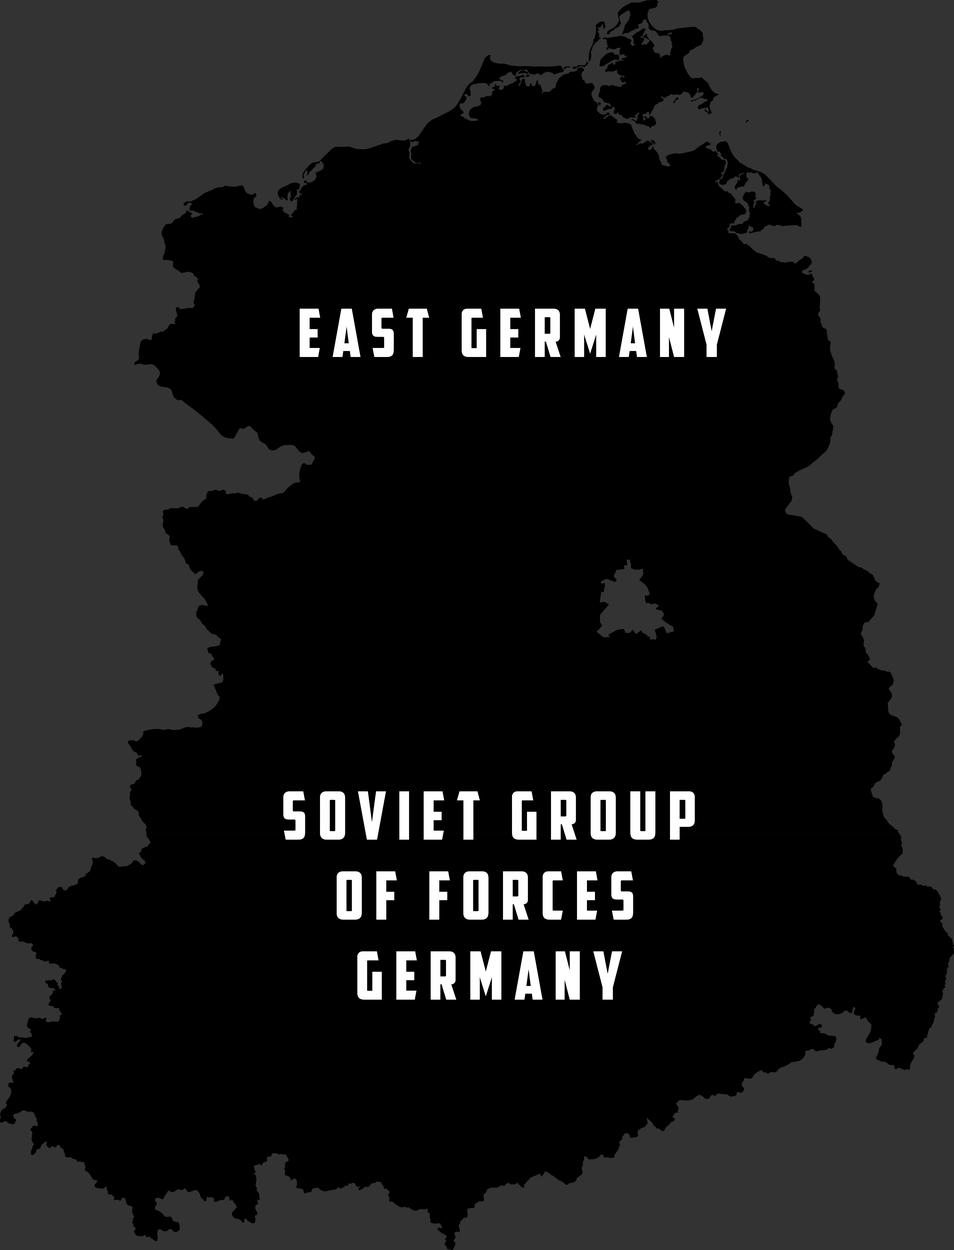
<style>
.page{position:relative;width:954px;height:1250px;background:#000000}
.page>*{position:absolute;margin:0}
.t1{font:66.7px "AmericanCaptain";letter-spacing:0.16em;color:#ffffff}
</style>
<div class="page">
<p class="t1" style="left:300px;top:309px;width:426px;height:48px">east germany</p>
<p class="t1" style="left:283px;top:791px;width:412px;height:209px;text-align:center">Soviet Group<br>of Forces <br>Germany</p>
</div>
